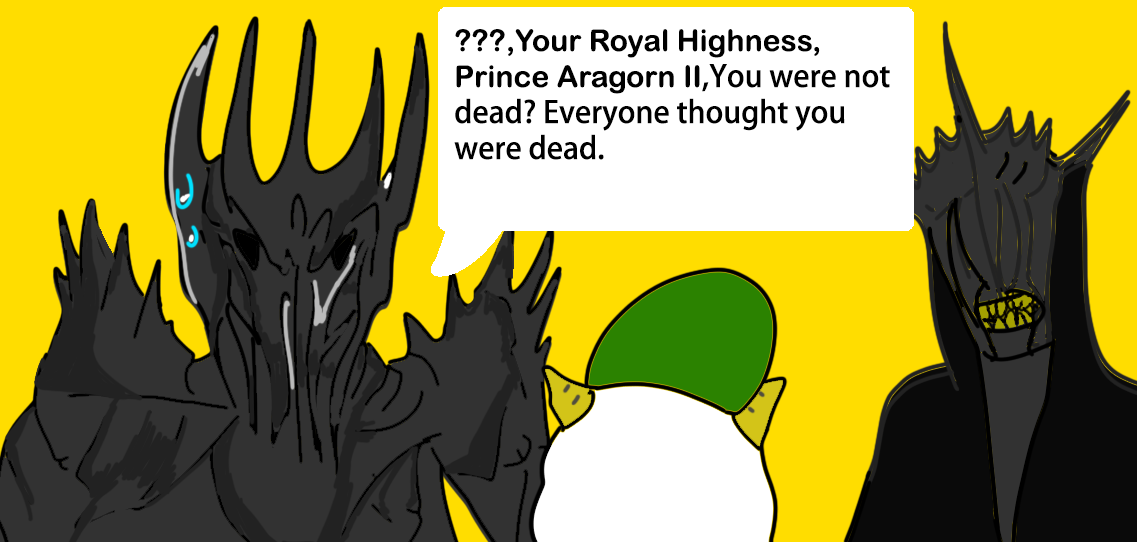
<style>
.page{position:relative;width:1137px;height:542px;background:#ffdd00}
.page>*{position:absolute;margin:0}
.t1{font:30px "AdobeHeitiStd-Regular";color:#000000}
.t2{font:30px "ArialRoundedMTBold";color:#000000}
</style>
<div class="page">
<p class="t1" style="left:454px;top:29px;width:436px;height:131px"><span class="t2">???,Your Royal Highness, <br>Prince Aragorn II</span>,You were not <br>dead? Everyone thought you <br>were dead.</p>
</div>
